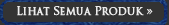
<style>
.page{position:relative;width:169px;height:25px;background:#333333}
.page>*{position:absolute;margin:0}
.t1{font:11.6px "TrajanPro3-Regular";color:#ededed;font-weight:bold;scale:0.93 1}
</style>
<div class="page">
<p class="t1" style="left:17px;top:6px;width:136px;height:10px">Lihat Semua Produk »</p>
</div>
